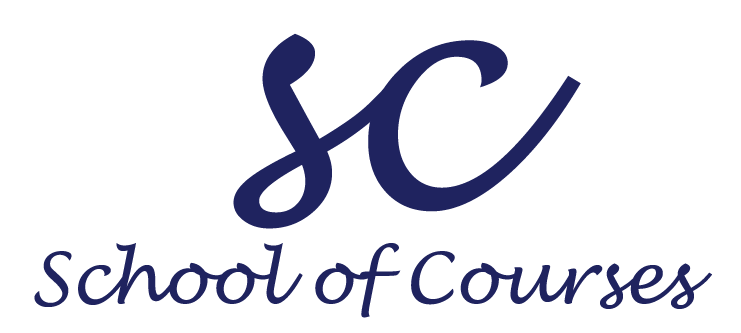
<style>
.page{position:relative;width:741px;height:333px;background:#ffffff}
.page>*{position:absolute;margin:0}
.t1{font:300px "LucidaHandwriting-Italic";color:#1f235f}
.t2{font:70px "LucidaHandwriting-Italic";color:#1f235f}
</style>
<div class="page">
<p class="t1" style="left:233px;top:33px;width:348px;height:196px">sc</p>
<p class="t2" style="left:34px;top:243px;width:678px;height:75px">School of Courses</p>
</div>
